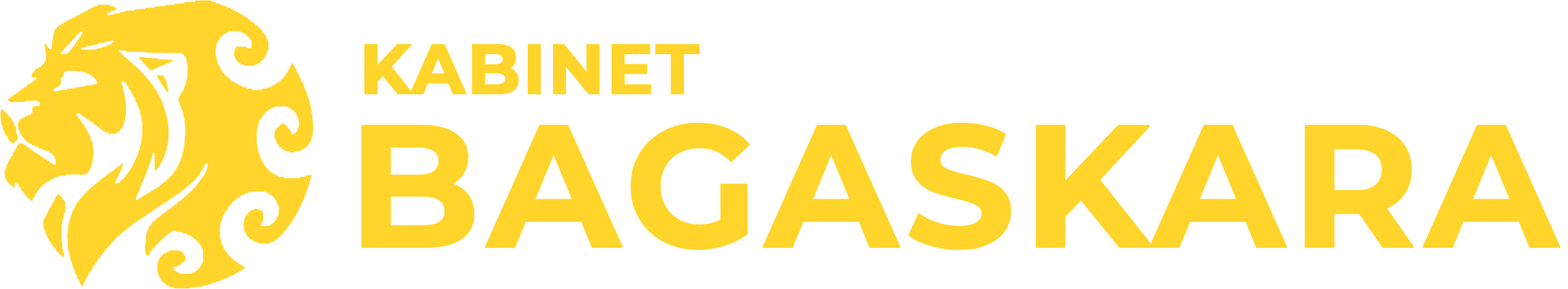
<style>
.page{position:relative;width:1568px;height:289px;background:#ffffff}
.page>*{position:absolute;margin:0}
.t1{font:173.6px/154.2px "Montserrat-Bold";letter-spacing:0.01em;color:#ffd52b;font-weight:bold}
.t2{font:34.7px/154.2px "Montserrat-Bold";letter-spacing:0.01em;color:#ffd52b;font-weight:bold}
.t3{font:69.4px/154.2px "Montserrat-Bold";letter-spacing:0.01em;color:#ffd52b;font-weight:bold}
</style>
<div class="page">
<p class="t1" style="left:361px;top:44px;width:1200px;height:206px"><span class="t2"> </span><span class="t3">KABINET<br></span>BAGASKARA</p>
</div>
